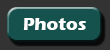
<style>
.page{position:relative;width:110px;height:50px;background:#15514d}
.page>*{position:absolute;margin:0}
.t1{font:18px "ErasITC-Bold";color:#ffffff}
</style>
<div class="page">
<p class="t1" style="left:23px;top:18px;width:63px;height:12px">Photos</p>
</div>
